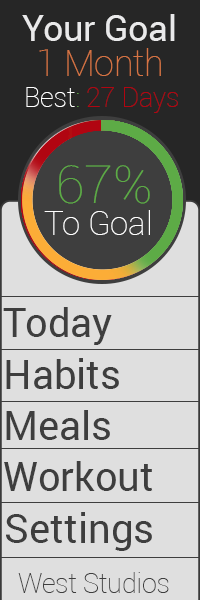
<style>
.page{position:relative;width:200px;height:600px;background:#dfdfdf}
.page>*{position:absolute;margin:0}
.t1{font:35.6px "Roboto-Regular";color:#e9e9ea}
.t2{font:35.6px "Roboto-Thin";color:#d67444}
.t3{font:26.7px "Roboto-Thin";color:#b10511}
.t4{font:26.7px "Roboto-Thin";color:#ffffff}
.t5{font:26.7px "Roboto-Thin";color:#5dab46}
.t6{font:52.5px "Roboto-Thin";color:#5dab46}
.t7{font:32.7px "Roboto-Thin";color:#ffffff}
.t8{font:40px "Roboto-Regular";color:#3e3e3e}
.t9{font:26.7px "Roboto-Thin";color:#3e3e3e}
</style>
<div class="page">
<p class="t1" style="left:22px;top:14px;width:153px;height:27px">Your Goal</p>
<p class="t2" style="left:39px;top:48px;width:122px;height:28px">1 Month</p>
<p class="t3" style="left:26px;top:87px;width:152px;height:26px"><span class="t4">Best</span><span class="t5">: </span>27 Days</p>
<p class="t6" style="left:59px;top:165px;width:91px;height:39px">67%</p>
<p class="t7" style="left:44px;top:210px;width:106px;height:25px">To Goal</p>
<p class="t8" style="left:3px;top:307px;width:109px;height:38px">Today</p>
<p class="t8" style="left:6px;top:358px;width:113px;height:31px">Habits</p>
<p class="t8" style="left:6px;top:410px;width:104px;height:30px">Meals</p>
<p class="t8" style="left:4px;top:461px;width:149px;height:30px">Workout</p>
<p class="t8" style="left:6px;top:512px;width:146px;height:39px">Settings</p>
<p class="t9" style="left:18px;top:572px;width:151px;height:21px">West Studios</p>
</div>
